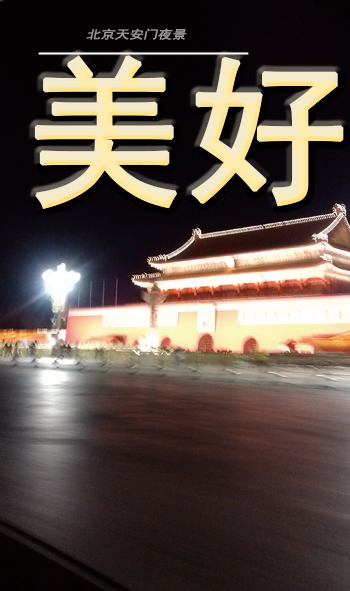
<style>
.page{position:relative;width:350px;height:591px}
.page>*{position:absolute;margin:0}
.t1{font:11.7px "SimHei";color:#b2a48f;font-style:italic;scale:1.22 1}
.t2{font:160px "SimHei";font-weight:bold}
</style>
<div class="page">
<p class="t1" style="left:86px;top:28px;width:101px;height:12px;opacity:0.9">北京天安门夜景</p>
<p class="t2" style="left:34px;top:55px;width:310px;height:155px">美好</p>
</div>
